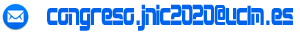
<style>
.page{position:relative;width:300px;height:33px;background:#ffffff}
.page>*{position:absolute;margin:0}
.t1{font:28.8px "D3-Circuitism";color:#0063eb;scale:0.46 1}
</style>
<div class="page">
<p class="t1" style="left:47px;top:4px;width:246px;height:27px">congreso.jnic2020@uclm.es</p>
</div>
